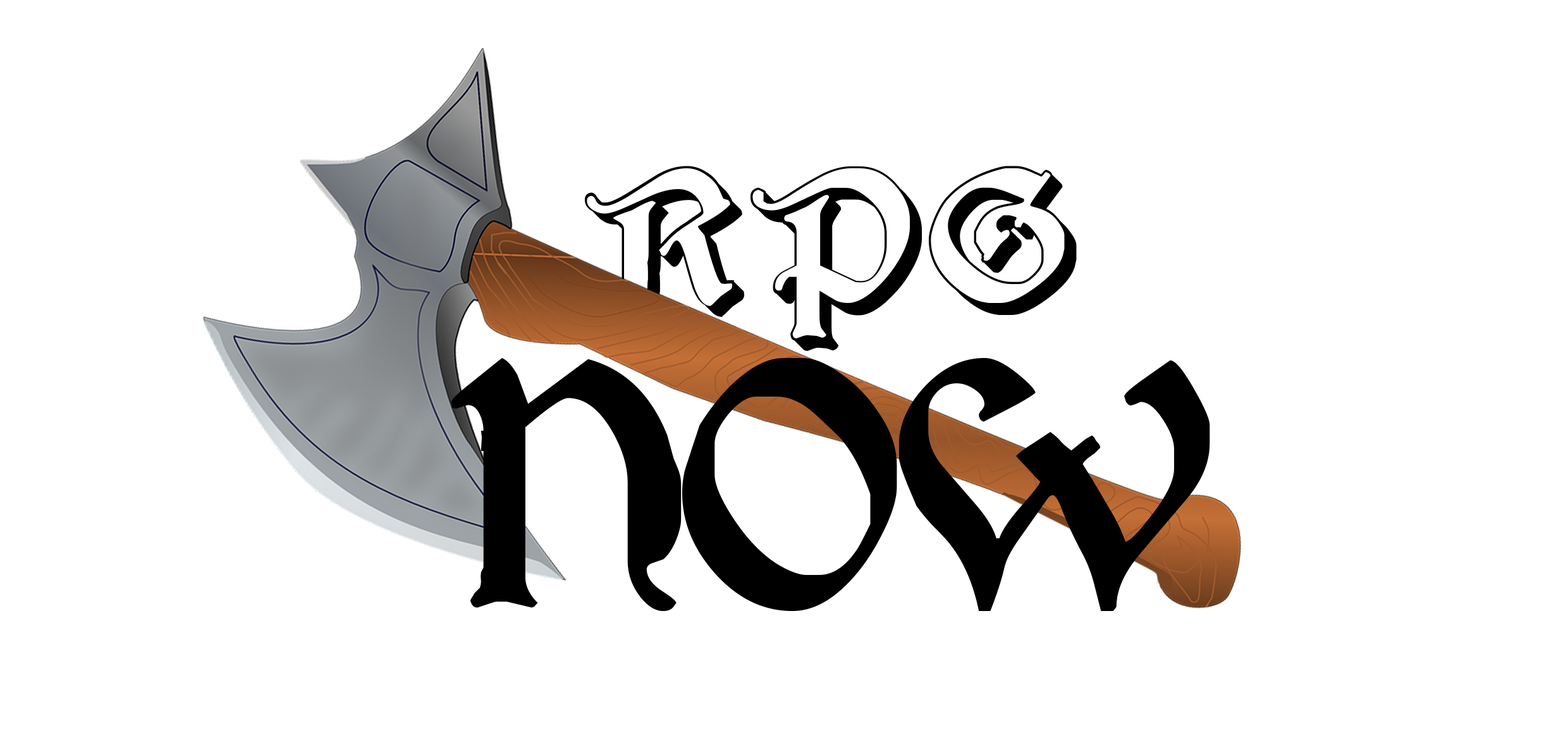
<style>
.page{position:relative;width:1568px;height:747px;background:#ffffff}
.page>*{position:absolute;margin:0}
.t1{font:210.8px "Augusta-Shadow";color:#000000}
.t2{font:395.2px "Augusta-Regular";color:#000000}
</style>
<div class="page">
<p class="t1" style="left:585px;top:166px;width:492px;height:185px">RPG</p>
<p class="t2" style="left:451px;top:357px;width:759px;height:254px">NOW</p>
</div>
